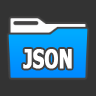
<style>
.page{position:relative;width:96px;height:96px;background:#333333}
.page>*{position:absolute;margin:0}
.t1{font:24.9px "Tahoma-Bold";color:#ffffff;font-weight:bold;scale:0.72 1}
</style>
<div class="page">
<p class="t1" style="left:23px;top:49px;width:49px;height:20px">JSON</p>
</div>
